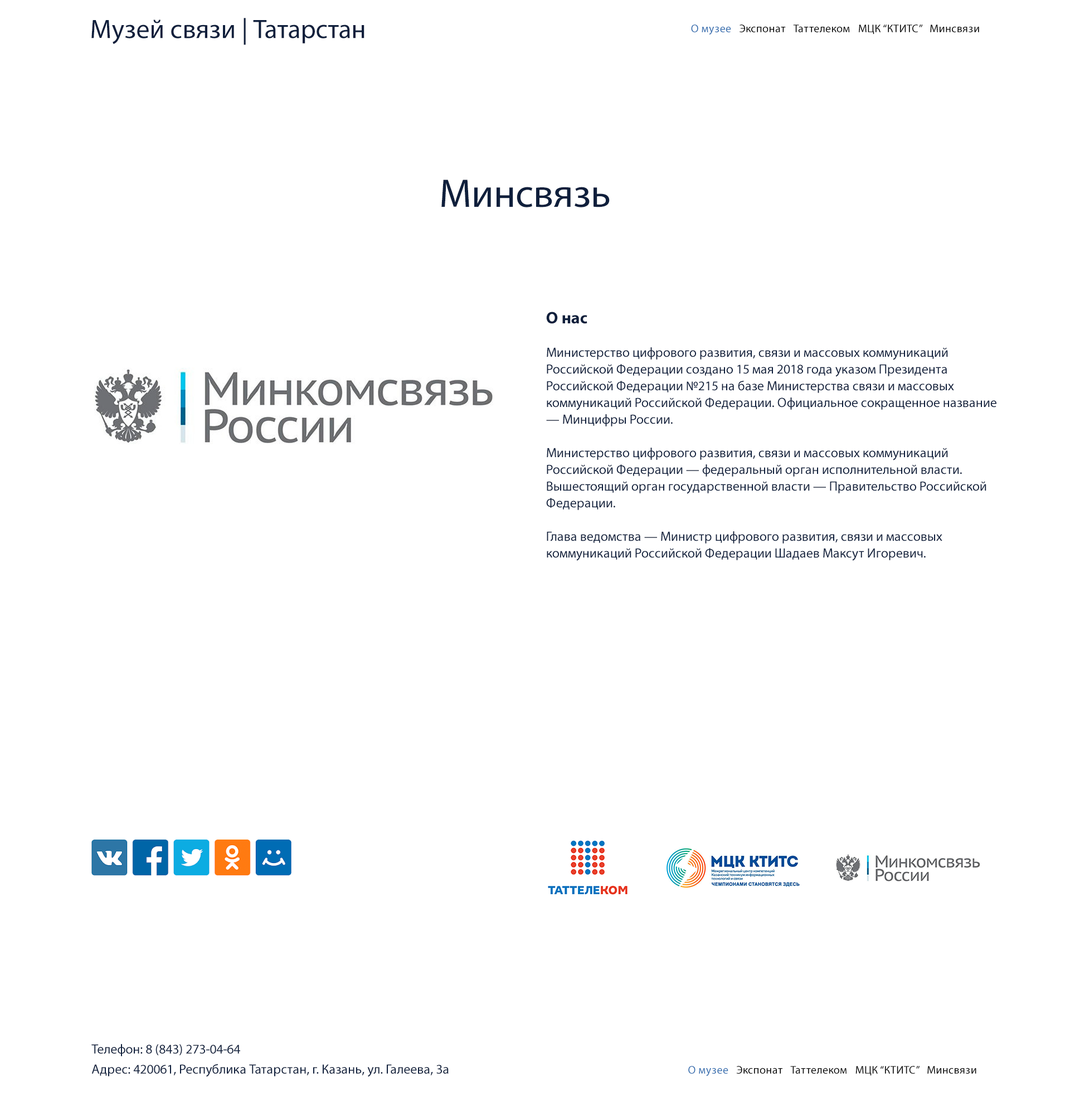
<style>
.page{position:relative;width:1070px;height:1115px;background:#ffffff}
.page>*{position:absolute;margin:0}
.t1{font:26.7px "MyriadPro-Regular";color:#0f1f3c}
.t2{font:11.1px "MyriadPro-Regular";letter-spacing:0.02em;color:#000000}
.t3{font:11.1px "MyriadPro-Regular";letter-spacing:0.02em;color:#356eaf}
.t4{font:40.1px "MyriadPro-Regular";color:#0f1f3c}
.t5{font:13.4px/16.7px "MyriadPro-Regular";color:#0f1f3c}
.t6{font:16.7px/16.7px "MyriadPro-Bold";color:#0f1f3c}
.t7{font:13.4px/20.1px "MyriadPro-Regular";color:#0f1f3c}
.t8{font:11.1px "MyriadPro-Regular";letter-spacing:0.02em;color:#040404}
</style>
<div class="page">
<p class="t1" style="left:91px;top:18px;width:273px;height:27px">Музей связи | Татарстан</p>
<p class="t2" style="left:691px;top:25px;width:288px;height:10px"><span class="t3">О музее </span>Экспонат Таттелеком МЦК “КТИТС” Минсвязи</p>
<p class="t4" style="left:441px;top:179px;width:169px;height:28px">Минсвязь</p>
<p class="t5" style="left:546px;top:312px;width:450px;height:249px"><span class="t6">О нас<br></span><br>Министерство цифрового развития, связи и массовых коммуникаций Российской Федерации создано 15 мая 2018 года указом Президента Российской Федерации №215 на базе Министерства связи и массовых коммуникаций Российской Федерации. Официальное сокращенное название — Минцифры России.   <br><br>Министерство цифрового развития, связи и массовых коммуникаций Российской Федерации — федеральный орган исполнительной власти. Вышестоящий орган государственной власти — Правительство Российской Федерации.<br><br>Глава ведомства — Министр цифрового развития, связи и массовых коммуникаций Российской Федерации Шадаев Максут Игоревич.<br><br>Цифровые телекоммуникационные услуги — 51 %<br>Телефонная связь — 29 %<br>Услуги пропуска трафика — 4 %<br>Аренда инфраструктуры — 8 %<br>Прочие услуги — 8 %<br>Количество базовых станций сотовой связи к концу 2017 года составило более 2500 шт. на территории Республики Татарстан. Доля ПАО «Таттелеком» фиксированной телефонной связи составляет 78 %.<br><br><br>Контакты:<br><br>Адрес: 420061, Казань, ул. Н. Ершова, 57 Показать на карте<br>Факс: 8 (843) 264-20-96<br>Эл. почта: kancel@tattelecom.ru</p>
<p class="t7" style="left:91px;top:1043px;width:358px;height:34px">Телефон: 8 (843) 273-04-64<br>Адрес: 420061, Республика Татарстан, г. Казань, ул. Галеева, 3а</p>
<p class="t8" style="left:688px;top:1065px;width:288px;height:10px"><span class="t3">О музее </span>Экспонат Таттелеком МЦК “КТИТС” Минсвязи</p>
</div>
